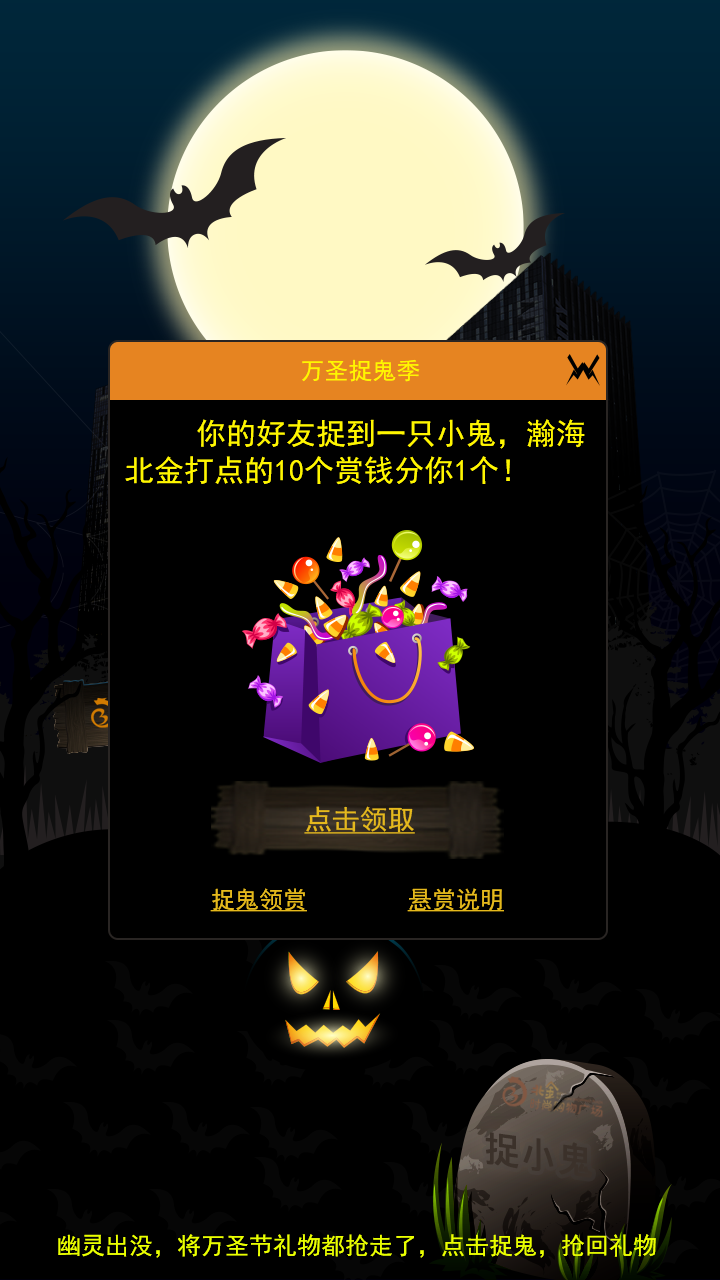
<style>
.page{position:relative;width:720px;height:1280px;background:#000000}
.page>*{position:absolute;margin:0}
.t1{font:24px "SimHei";color:#fff600}
.t2{font:30px/37.3px "SimHei";color:#fff600}
.t3{font:27.6px "SimHei";color:#e5b91d;text-decoration:underline}
.t4{font:24px "SimHei";color:#e5b91d;text-decoration:underline}
</style>
<div class="page">
<p class="t1" style="left:302px;top:359px;width:118px;height:23px">万圣捉鬼季</p>
<p class="t2" style="left:125px;top:419px;width:460px;height:66px">你的好友捉到一只小鬼，瀚海北金打点的10个赏钱分你1个！</p>
<p class="t3" style="left:304px;top:806px;width:111px;height:28px">点击领取</p>
<p class="t4" style="left:210px;top:888px;width:97px;height:24px">捉鬼领赏</p>
<p class="t4" style="left:407px;top:888px;width:97px;height:24px">悬赏说明</p>
</div>
